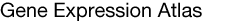
<style>
.page{position:relative;width:225px;height:21px;background:#ffffff}
.page>*{position:absolute;margin:0}
.t1{font:20px "HelveticaNeueLTPro-Roman";color:#000000}
</style>
<div class="page">
<p class="t1" style="left:0px;top:2px;width:202px;height:19px">Gene Expression Atlas</p>
</div>
